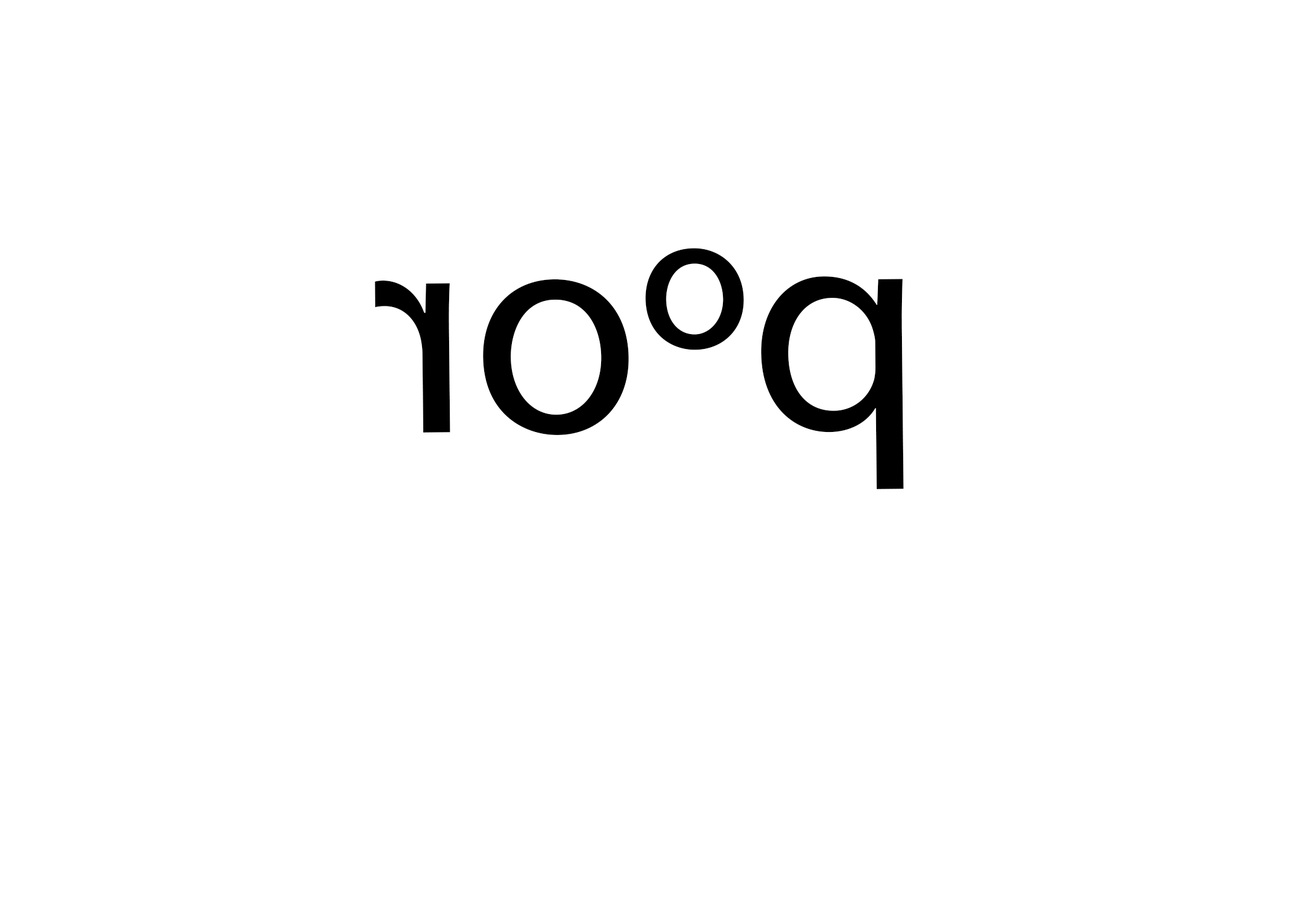
<style>
.page{position:relative;width:1292px;height:923px;background:#ffffff}
.page>*{position:absolute;margin:0}
.t1{font:307.6px "MyriadPro-Regular";color:#000000}
</style>
<div class="page">
<p class="t1" style="left:375px;top:248px;width:529px;height:241px;rotate:179deg">poor</p>
</div>
